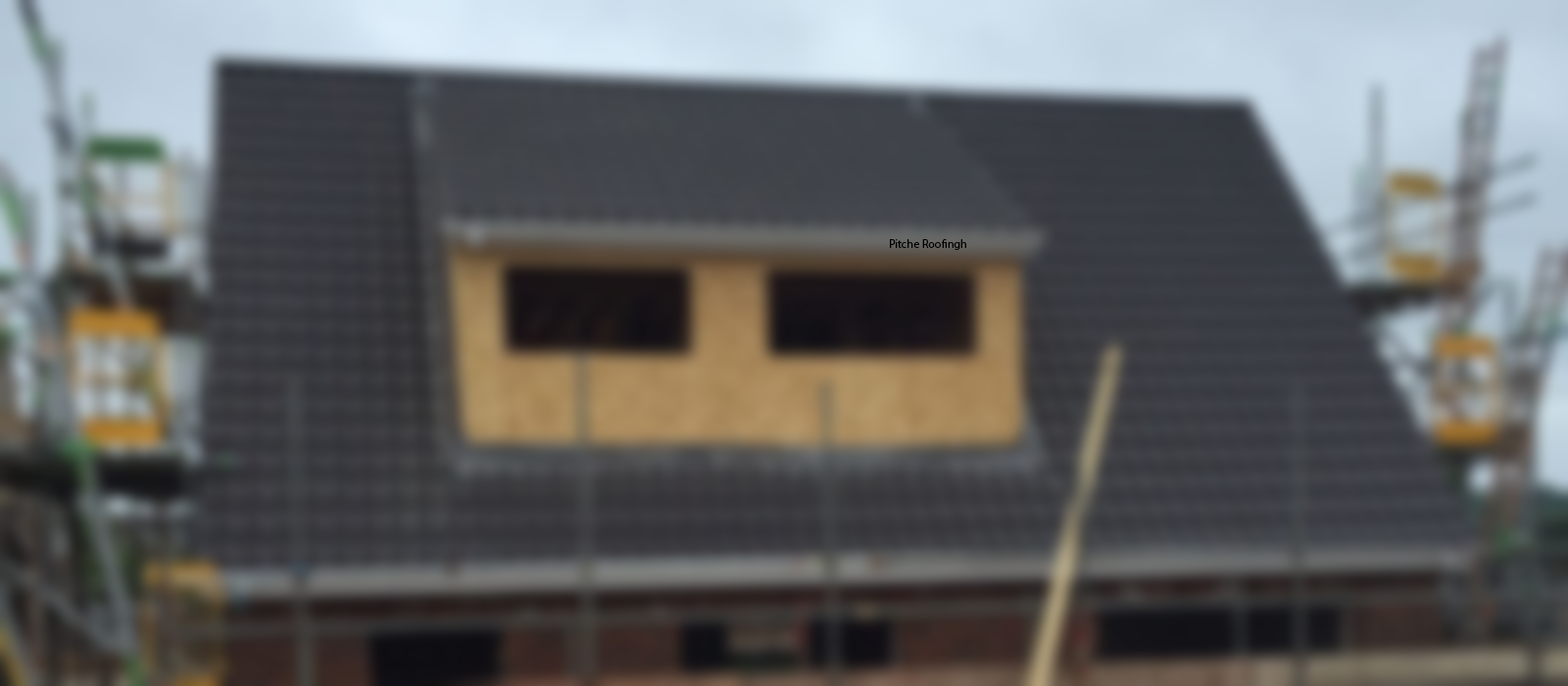
<style>
.page{position:relative;width:1568px;height:686px}
.page>*{position:absolute;margin:0}
.t1{font:11.8px "MyriadPro-Regular";color:#000000}
</style>
<div class="page">
<p class="t1" style="left:890px;top:239px;width:76px;height:11px">Pitche Roofingh</p>
</div>
